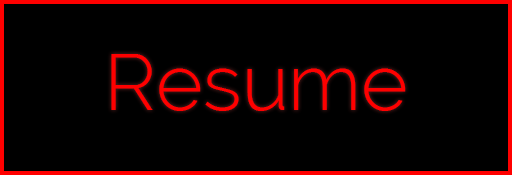
<style>
.page{position:relative;width:512px;height:175px;background:#000000}
.page>*{position:absolute;margin:0}
.t1{font:80px "Raleway-Light";color:#ff0000}
</style>
<div class="page">
<p class="t1" style="left:111px;top:54px;width:295px;height:57px">Resume</p>
</div>
